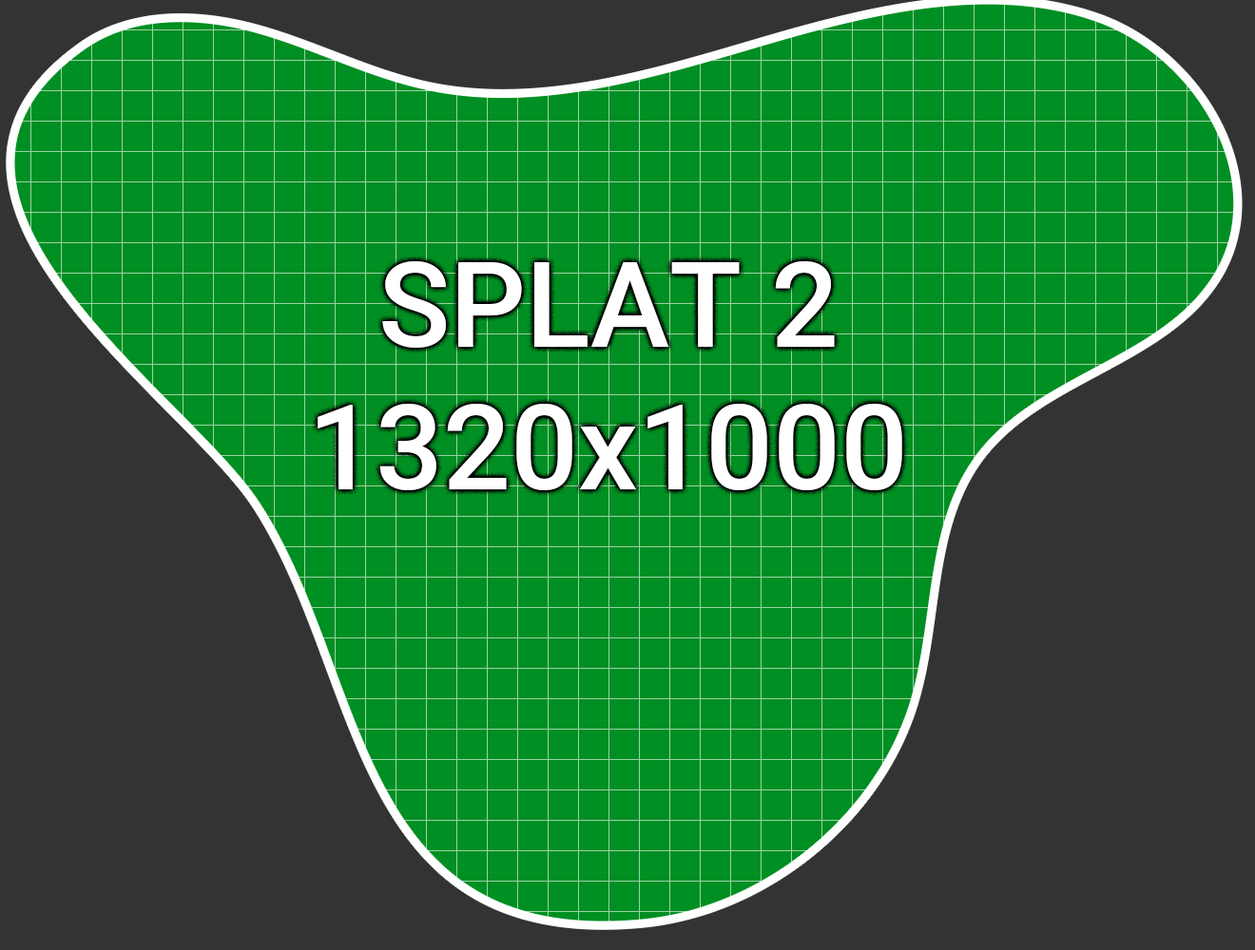
<style>
.page{position:relative;width:1255px;height:950px;background:#333333}
.page>*{position:absolute;margin:0}
.t1{font:118.8px "Roboto-Medium";color:#ffffff}
</style>
<div class="page">
<p class="t1" style="left:317px;top:261px;width:585px;height:229px;text-align:center">SPLAT 2<br>1320x1000</p>
</div>
